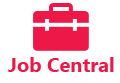
<style>
.page{position:relative;width:120px;height:83px;background:#ffffff}
.page>*{position:absolute;margin:0}
.t1{font:20px "SegoeUI-Bold";color:#ed1847}
</style>
<div class="page">
<p class="t1" style="left:8px;top:57px;width:106px;height:15px">Job Central</p>
</div>
